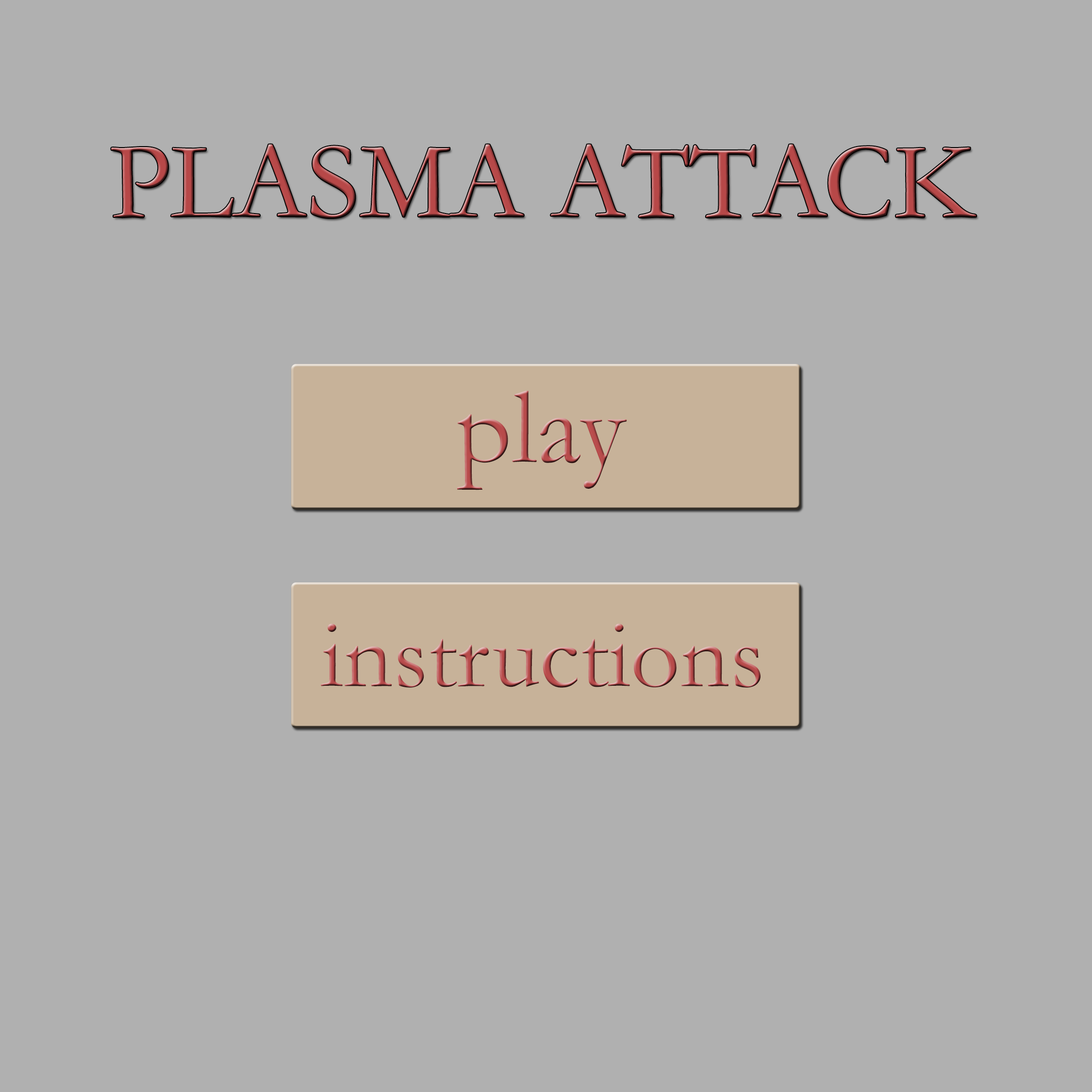
<style>
.page{position:relative;width:1092px;height:1092px;background:#b0b0b0}
.page>*{position:absolute;margin:0}
.t1{font:109.2px "Garamond"}
.t2{font:97.1px "Garamond"}
</style>
<div class="page">
<p class="t1" style="left:111px;top:144px;width:865px;height:74px"><span class="t2"> </span>PLASMA ATTACK</p>
<p class="t1" style="left:457px;top:391px;width:170px;height:99px">play</p>
<p class="t2" style="left:321px;top:624px;width:440px;height:64px">instructions</p>
</div>
